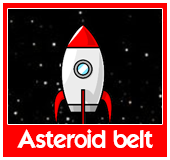
<style>
.page{position:relative;width:170px;height:160px;background:#000000}
.page>*{position:absolute;margin:0}
.t1{font:24px "ELEGANCE";color:#ffffff}
</style>
<div class="page">
<p class="t1" style="left:17px;top:129px;width:136px;height:19px">Asteroid belt</p>
</div>
